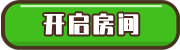
<style>
.page{position:relative;width:180px;height:50px;background:#40bf1d}
.page>*{position:absolute;margin:0}
.t1{font:21.9px "ZhenyanGB-Regular";letter-spacing:0.13em;color:#ffffff}
</style>
<div class="page">
<p class="t1" style="left:43px;top:13px;width:96px;height:22px">开启房间</p>
</div>
